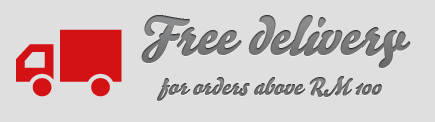
<style>
.page{position:relative;width:435px;height:122px;background:#dfdfdf}
.page>*{position:absolute;margin:0}
.t1{font:54px "Bello-Script";color:#767778;font-style:italic}
.t2{font:24px "Bello-Script";color:#6d6d6e;font-style:italic}
</style>
<div class="page">
<p class="t1" style="left:141px;top:15px;width:270px;height:53px">Free delivery</p>
<p class="t2" style="left:157px;top:76px;width:225px;height:25px">for orders above RM 100</p>
</div>
